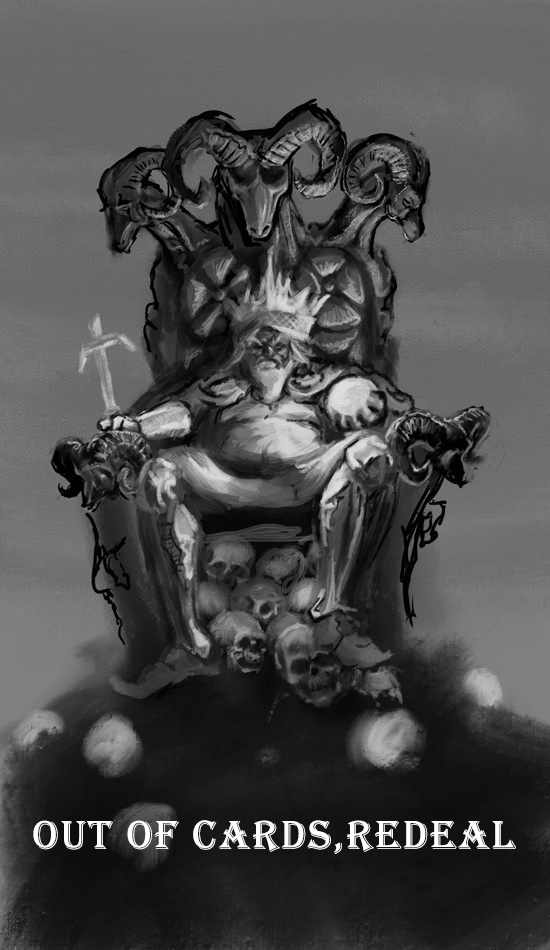
<style>
.page{position:relative;width:550px;height:950px}
.page>*{position:absolute;margin:0}
.t1{font:41.7px "Algerian";letter-spacing:0.05em;color:#ffffff}
</style>
<div class="page">
<p class="t1" style="left:33px;top:820px;width:483px;height:34px">Out of cards,redeal</p>
</div>
